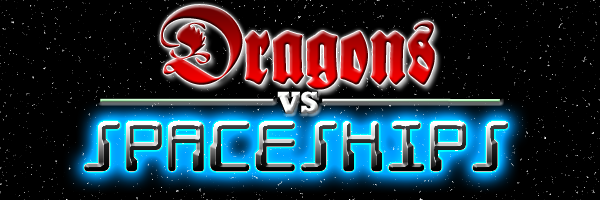
<style>
.page{position:relative;width:600px;height:200px;background:#000000}
.page>*{position:absolute;margin:0}
.t1{font:72px "SchmaleAnzeigenschriftZier"}
.t2{font:72px "DroidLover"}
</style>
<div class="page">
<p class="t1" style="left:160px;top:5px;width:275px;height:85px">Dragons</p>
<p class="t2" style="left:84px;top:121px;width:424px;height:51px">spaceships</p>
<p class="t2" style="left:84px;top:121px;width:424px;height:51px">spaceships</p>
<p class="t2" style="left:84px;top:121px;width:424px;height:51px">spaceships</p>
</div>
